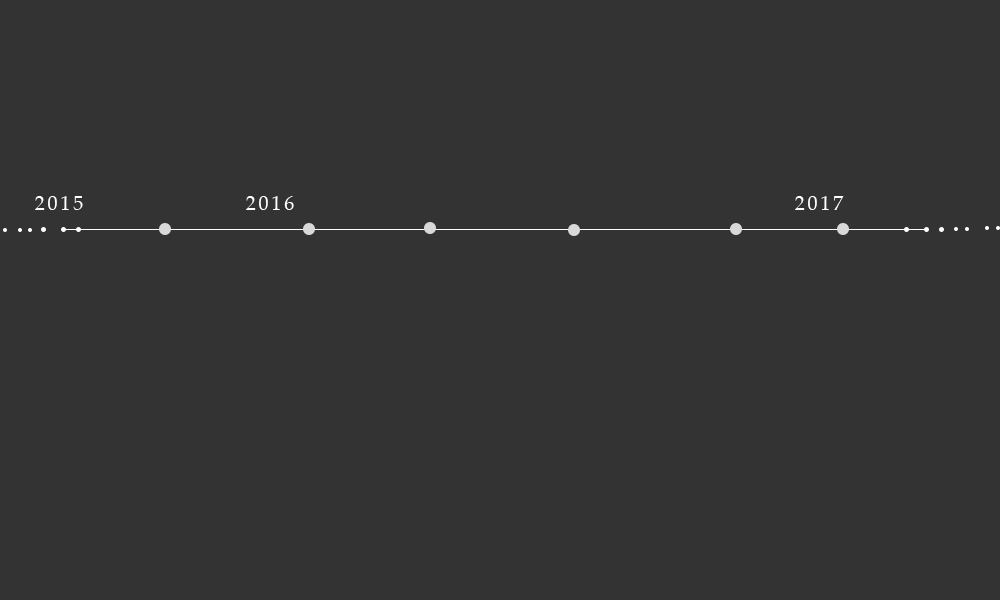
<style>
.page{position:relative;width:1000px;height:600px;background:#333333}
.page>*{position:absolute;margin:0}
.t1{font:20px "Palatino-Roman";letter-spacing:0.14em;color:#ffffff}
</style>
<div class="page">
<p class="t1" style="left:35px;top:196px;width:48px;height:14px">2015</p>
<p class="t1" style="left:246px;top:196px;width:48px;height:14px">2016</p>
<p class="t1" style="left:795px;top:196px;width:49px;height:14px">2017</p>
</div>
